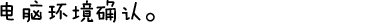
<style>
.page{position:relative;width:378px;height:23px;background:#ffffff}
.page>*{position:absolute;margin:0}
.t1{font:26px "¢è?";color:#000000}
</style>
<div class="page">
<p class="t1" style="left:0px;top:0px;width:155px;height:23px">电脑环境确认。</p>
</div>
